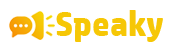
<style>
.page{position:relative;width:178px;height:52px;background:#ffffff}
.page>*{position:absolute;margin:0}
.t1{font:34.9px "HPSimplified-Bold";color:#f6c706}
</style>
<div class="page">
<p class="t1" style="left:56px;top:10px;width:107px;height:32px">Speaky</p>
</div>
